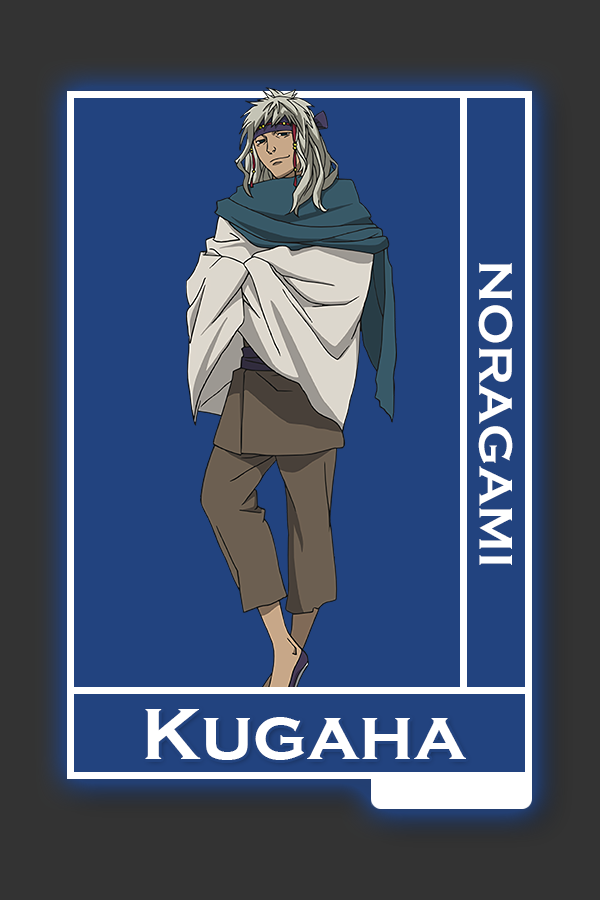
<style>
.page{position:relative;width:600px;height:900px;background:#22437f}
.page>*{position:absolute;margin:0}
.t1{font:48.8px "CopperplateGothic-Bold";color:#ffffff}
.t2{font:75px "CopperplateGothic-Bold";color:#ffffff}
</style>
<div class="page">
<p class="t1" style="left:478px;top:263px;width:35px;height:302px;rotate:90deg">NORAGAMI</p>
<p class="t2" style="left:145px;top:709px;width:321px;height:51px">Kugaha</p>
</div>
